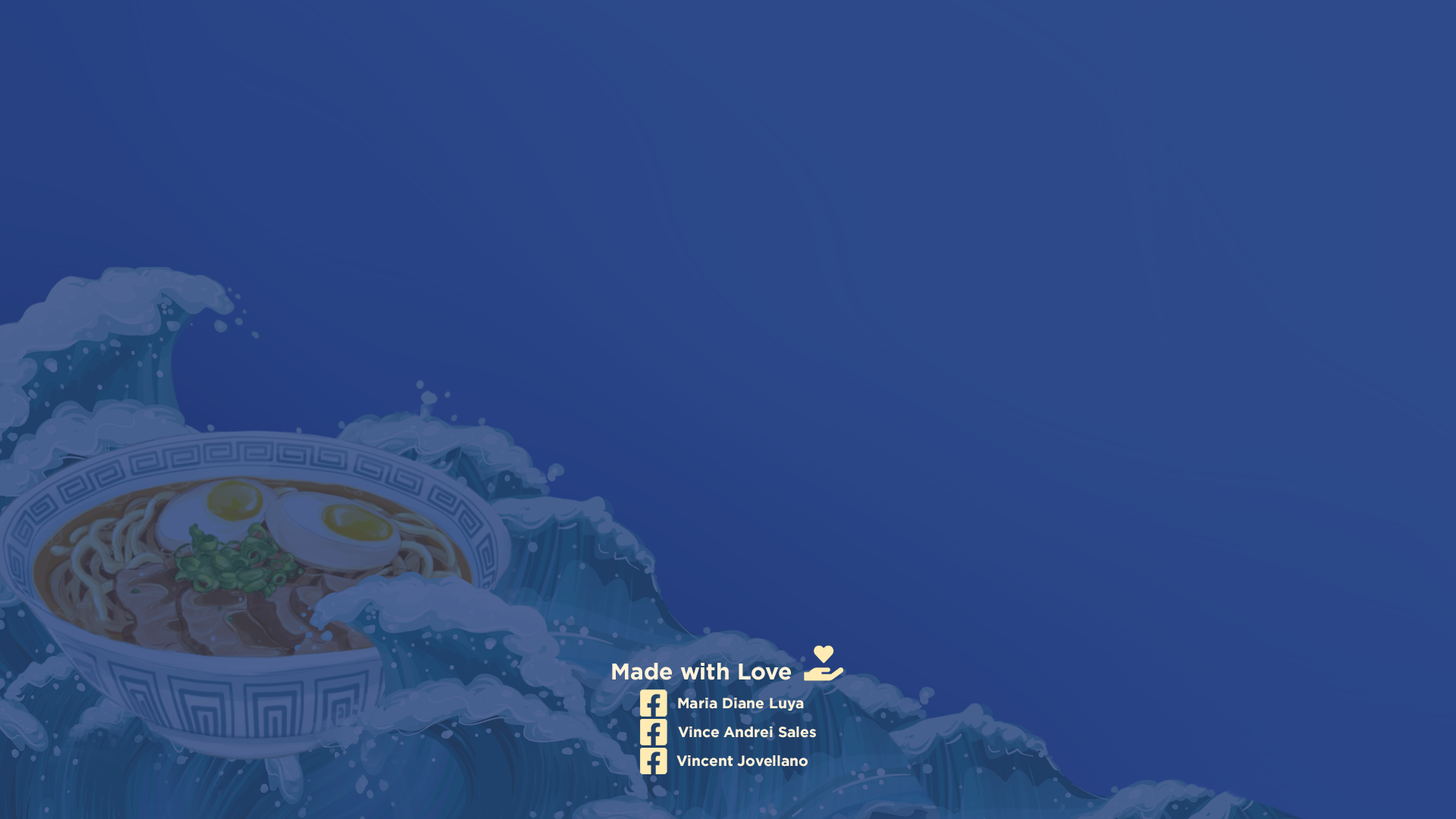
<style>
.page{position:relative;width:1456px;height:819px}
.page>*{position:absolute;margin:0}
.t1{font:39.1px "Gotham-Bold";color:#fff3dc}
.t2{font:25px "Gotham-Bold";color:#fff3dc}
</style>
<div class="page">
<p class="t1" style="left:612px;top:663px;width:179px;height:17px">Made with Love</p>
<p class="t2" style="left:678px;top:698px;width:126px;height:13px">Maria Diane Luya</p>
<p class="t2" style="left:678px;top:726px;width:138px;height:12px">Vince Andrei Sales</p>
<p class="t2" style="left:676px;top:755px;width:132px;height:12px">Vincent Jovellano</p>
</div>
